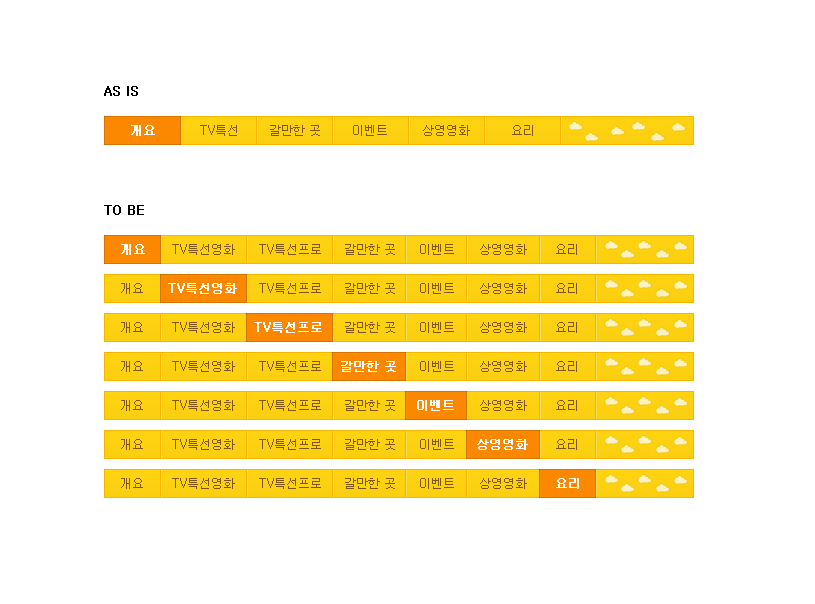
<style>
.page{position:relative;width:815px;height:604px;background:#ffffff}
.page>*{position:absolute;margin:0}
.t1{font:12px "Gulim";color:#000000;text-transform:uppercase;font-weight:bold}
.t2{font:12px "Gulim";color:#fffefe}
.t3{font:12px "Gulim";color:#fffefe;font-weight:bold}
.t4{font:12px "Gulim";color:#7e5616}
.t5{font:12px "Gulim"}
</style>
<div class="page">
<p class="t1" style="left:104px;top:86px;width:34px;height:10px">as is</p>
<p class="t2" style="left:131px;top:125px;width:22px;height:11px">개요</p>
<p class="t3" style="left:131px;top:125px;width:24px;height:11px">개요</p>
<p class="t4" style="left:200px;top:125px;width:37px;height:11px">TV특선</p>
<p class="t4" style="left:270px;top:125px;width:50px;height:11px">갈만한 곳</p>
<p class="t4" style="left:353px;top:125px;width:34px;height:11px">이벤트</p>
<p class="t4" style="left:423px;top:125px;width:47px;height:11px">상영영화</p>
<p class="t4" style="left:512px;top:125px;width:21px;height:11px">요리</p>
<p class="t1" style="left:104px;top:205px;width:40px;height:10px">to be</p>
<p class="t2" style="left:121px;top:244px;width:22px;height:11px">개요</p>
<p class="t3" style="left:121px;top:244px;width:24px;height:11px">개요</p>
<p class="t4" style="left:172px;top:244px;width:63px;height:11px">TV특선영화</p>
<p class="t4" style="left:259px;top:244px;width:62px;height:11px">TV특선프로</p>
<p class="t4" style="left:345px;top:244px;width:50px;height:11px">갈만한 곳</p>
<p class="t4" style="left:420px;top:244px;width:34px;height:11px">이벤트</p>
<p class="t4" style="left:480px;top:244px;width:47px;height:11px">상영영화</p>
<p class="t4" style="left:556px;top:244px;width:21px;height:11px">요리</p>
<p class="t4" style="left:121px;top:283px;width:22px;height:11px">개요</p>
<p class="t3" style="left:168px;top:283px;width:69px;height:11px">TV특선영화</p>
<p class="t2" style="left:172px;top:283px;width:63px;height:11px">TV특선영화</p>
<p class="t4" style="left:259px;top:283px;width:62px;height:11px">TV특선프로</p>
<p class="t4" style="left:345px;top:283px;width:50px;height:11px">갈만한 곳</p>
<p class="t4" style="left:420px;top:283px;width:34px;height:11px">이벤트</p>
<p class="t4" style="left:480px;top:283px;width:47px;height:11px">상영영화</p>
<p class="t4" style="left:556px;top:283px;width:21px;height:11px">요리</p>
<p class="t4" style="left:121px;top:322px;width:22px;height:11px">개요</p>
<p class="t4" style="left:172px;top:322px;width:63px;height:11px">TV특선영화</p>
<p class="t3" style="left:254px;top:322px;width:68px;height:11px">TV특선프로</p>
<p class="t5" style="left:259px;top:322px;width:62px;height:11px">TV특선프로</p>
<p class="t4" style="left:345px;top:322px;width:50px;height:11px">갈만한 곳</p>
<p class="t4" style="left:420px;top:322px;width:34px;height:11px">이벤트</p>
<p class="t4" style="left:480px;top:322px;width:47px;height:11px">상영영화</p>
<p class="t4" style="left:556px;top:322px;width:21px;height:11px">요리</p>
<p class="t4" style="left:121px;top:361px;width:22px;height:11px">개요</p>
<p class="t4" style="left:172px;top:361px;width:63px;height:11px">TV특선영화</p>
<p class="t4" style="left:259px;top:361px;width:62px;height:11px">TV특선프로</p>
<p class="t3" style="left:341px;top:361px;width:55px;height:11px">갈만한 곳</p>
<p class="t4" style="left:420px;top:361px;width:34px;height:11px">이벤트</p>
<p class="t4" style="left:480px;top:361px;width:47px;height:11px">상영영화</p>
<p class="t4" style="left:556px;top:361px;width:21px;height:11px">요리</p>
<p class="t4" style="left:121px;top:400px;width:22px;height:11px">개요</p>
<p class="t4" style="left:172px;top:400px;width:63px;height:11px">TV특선영화</p>
<p class="t4" style="left:259px;top:400px;width:62px;height:11px">TV특선프로</p>
<p class="t4" style="left:345px;top:400px;width:50px;height:11px">갈만한 곳</p>
<p class="t3" style="left:417px;top:400px;width:37px;height:11px">이벤트</p>
<p class="t4" style="left:480px;top:400px;width:47px;height:11px">상영영화</p>
<p class="t4" style="left:556px;top:400px;width:21px;height:11px">요리</p>
<p class="t4" style="left:121px;top:439px;width:22px;height:11px">개요</p>
<p class="t4" style="left:172px;top:439px;width:63px;height:11px">TV특선영화</p>
<p class="t4" style="left:259px;top:439px;width:62px;height:11px">TV특선프로</p>
<p class="t4" style="left:345px;top:439px;width:50px;height:11px">갈만한 곳</p>
<p class="t4" style="left:420px;top:439px;width:34px;height:11px">이벤트</p>
<p class="t3" style="left:477px;top:439px;width:51px;height:11px">상영영화</p>
<p class="t2" style="left:480px;top:439px;width:47px;height:11px">상영영화</p>
<p class="t4" style="left:556px;top:439px;width:21px;height:11px">요리</p>
<p class="t4" style="left:121px;top:478px;width:22px;height:11px">개요</p>
<p class="t4" style="left:172px;top:478px;width:63px;height:11px">TV특선영화</p>
<p class="t4" style="left:259px;top:478px;width:62px;height:11px">TV특선프로</p>
<p class="t4" style="left:345px;top:478px;width:50px;height:11px">갈만한 곳</p>
<p class="t4" style="left:420px;top:478px;width:34px;height:11px">이벤트</p>
<p class="t4" style="left:480px;top:478px;width:47px;height:11px">상영영화</p>
<p class="t2" style="left:556px;top:478px;width:21px;height:11px">요리</p>
<p class="t3" style="left:556px;top:478px;width:23px;height:11px">요리</p>
</div>
